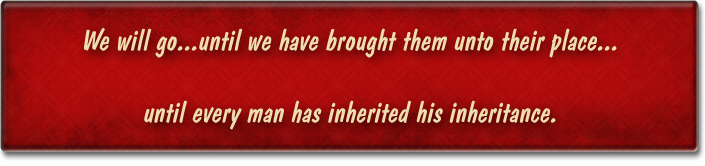
<style>
.page{position:relative;width:705px;height:166px}
.page>*{position:absolute;margin:0}
.t1{font:30px "DomDiagonalBT-Regular";color:#efddaf}
</style>
<div class="page">
<p class="t1" style="left:84px;top:28px;width:533px;height:102px;text-align:center">We will go...until we have brought them unto their place...<br><br>until every man has inherited his inheritance.</p>
</div>
